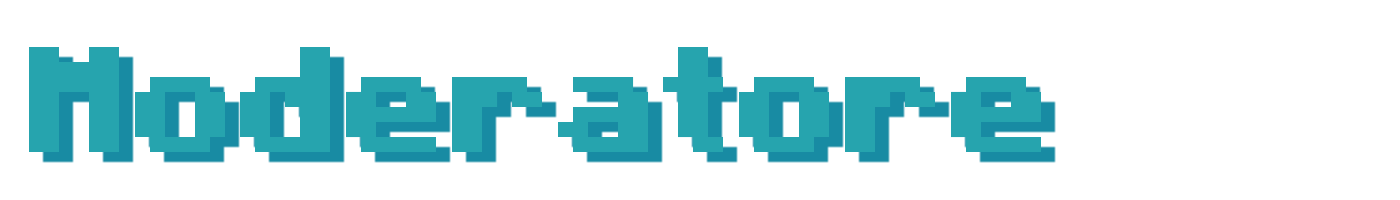
<style>
.page{position:relative;width:1400px;height:200px;background:#ffffff}
.page>*{position:absolute;margin:0}
.t1{font:150px "Minecraft-Bold";letter-spacing:0.005em;color:#26a4ae}
</style>
<div class="page">
<p class="t1" style="left:29px;top:47px;width:1012px;height:105px">Moderatore</p>
</div>
